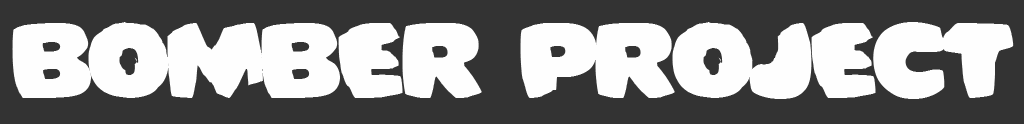
<style>
.page{position:relative;width:1024px;height:124px;background:#333333}
.page>*{position:absolute;margin:0}
.t1{font:100px "Bomberman";color:#fefefe}
</style>
<div class="page">
<p class="t1" style="left:12px;top:22px;width:1002px;height:77px">Bomber project</p>
</div>
